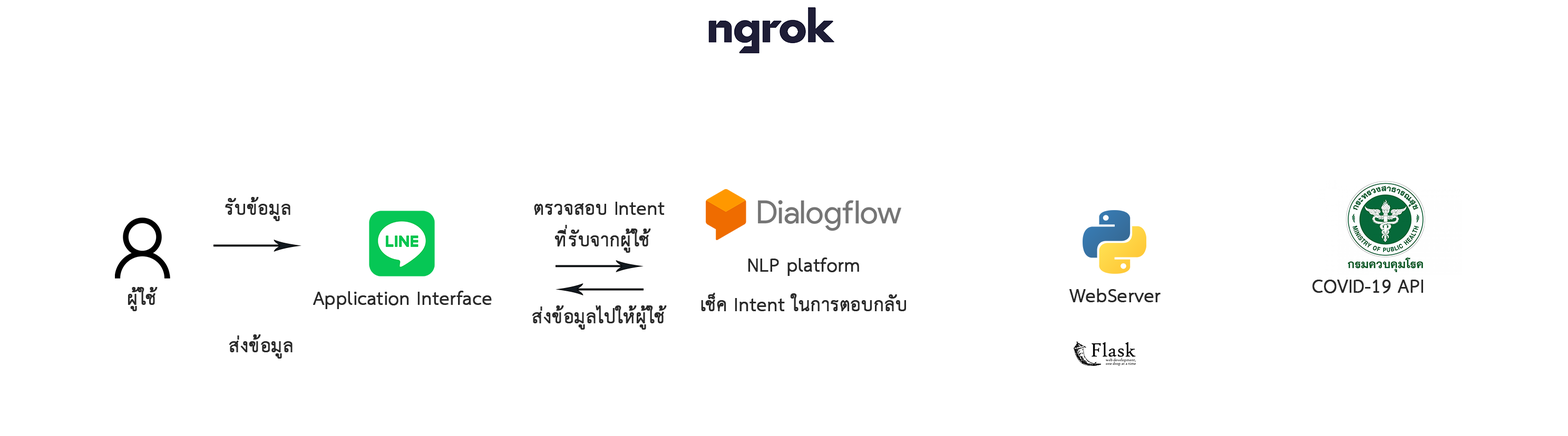
<style>
.page{position:relative;width:1568px;height:436px;background:#ffffff}
.page>*{position:absolute;margin:0}
.t1{font:26.4px "THSarabunNew";color:#292929;font-weight:bold}
</style>
<div class="page">
<p class="t1" style="left:225px;top:197px;width:65px;height:24px">รับข้อมูล</p>
<p class="t1" style="left:534px;top:202px;width:131px;height:51px;text-align:center">ตรวจสอบ Intent <br>ที่รับจากผู้ใช้</p>
<p class="t1" style="left:748px;top:258px;width:111px;height:18px">NLP platform</p>
<p class="t1" style="left:1312px;top:280px;width:111px;height:14px">COVID-19 API</p>
<p class="t1" style="left:128px;top:287px;width:30px;height:24px">ผู้ใช้</p>
<p class="t1" style="left:313px;top:291px;width:179px;height:18px">Application Interface</p>
<p class="t1" style="left:701px;top:293px;width:205px;height:18px">เช็ค Intent ในการตอบกลับ</p>
<p class="t1" style="left:1069px;top:289px;width:92px;height:14px">WebServer</p>
<p class="t1" style="left:532px;top:306px;width:135px;height:24px">ส่งข้อมูลไปให้ผู้ใช้</p>
<p class="t1" style="left:229px;top:335px;width:64px;height:24px">ส่งข้อมูล</p>
</div>
